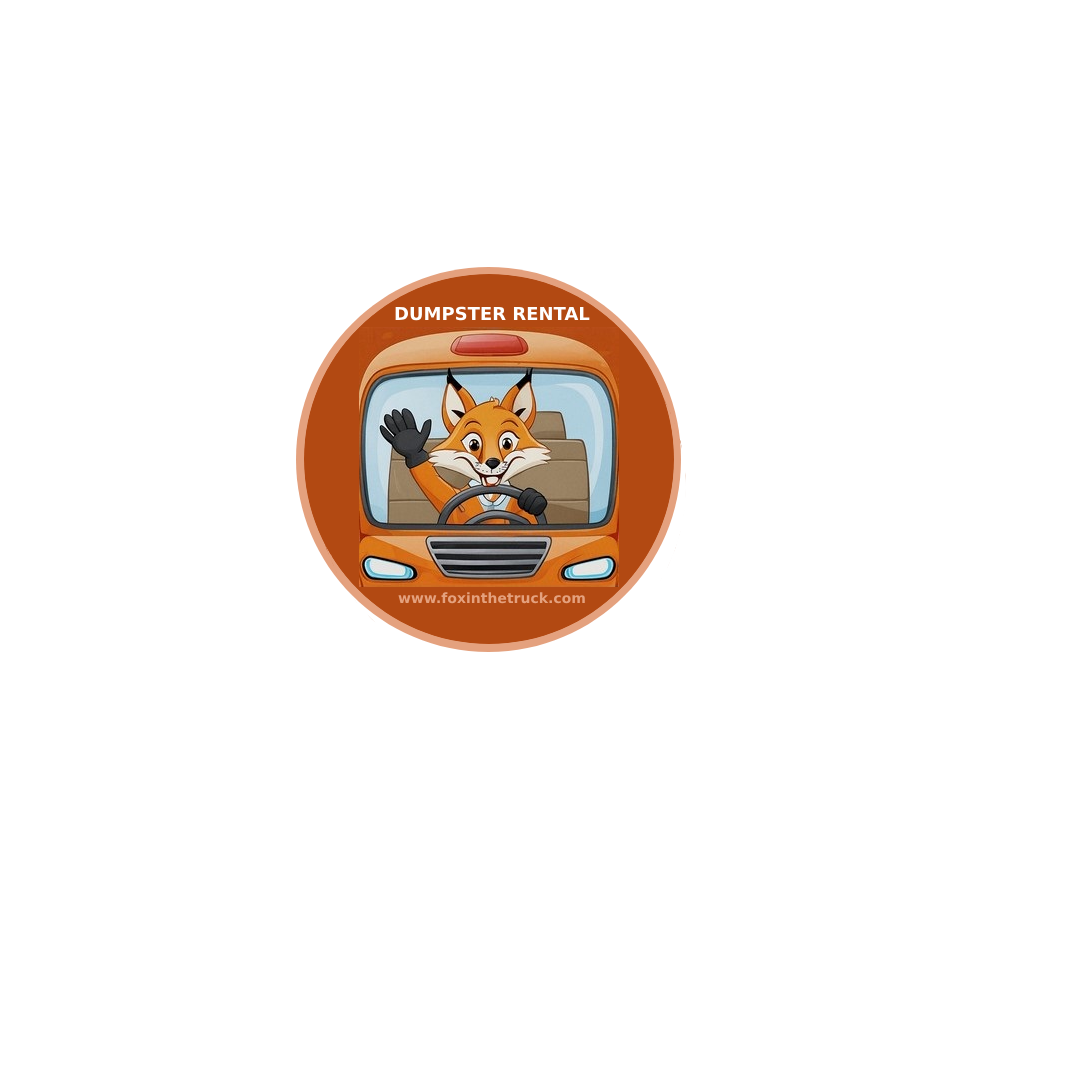
<style>
.page{position:relative;width:1080px;height:1080px;background:#ffffff}
.page>*{position:absolute;margin:0}
.t1{font:18px "DejaVuSans-Bold";color:#ffffff}
.t2{font:14px "DejaVuSans-Bold";color:#e4a17e}
</style>
<div class="page">
<p class="t1" style="left:395px;top:306px;width:195px;height:15px">DUMPSTER RENTAL</p>
<p class="t2" style="left:398px;top:592px;width:187px;height:12px">www.foxinthetruck.com</p>
</div>
